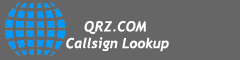
<style>
.page{position:relative;width:240px;height:60px;background:#666666}
.page>*{position:absolute;margin:0}
.t1{font:14px "Trebuchet-BoldItalic";color:#ffffff}
</style>
<div class="page">
<p class="t1" style="left:66px;top:21px;width:103px;height:31px;text-align:center">QRZ.COM <br>Callsign Lookup</p>
</div>
